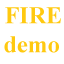
<style>
.page{position:relative;width:64px;height:64px;background:#ffffff}
.page>*{position:absolute;margin:0}
.t1{font:24px "TimesNewRomanPS-BoldMT";color:#ffc910}
</style>
<div class="page">
<p class="t1" style="left:5px;top:7px;width:56px;height:17px">FIRE</p>
<p class="t1" style="left:4px;top:36px;width:55px;height:17px">demo</p>
</div>
